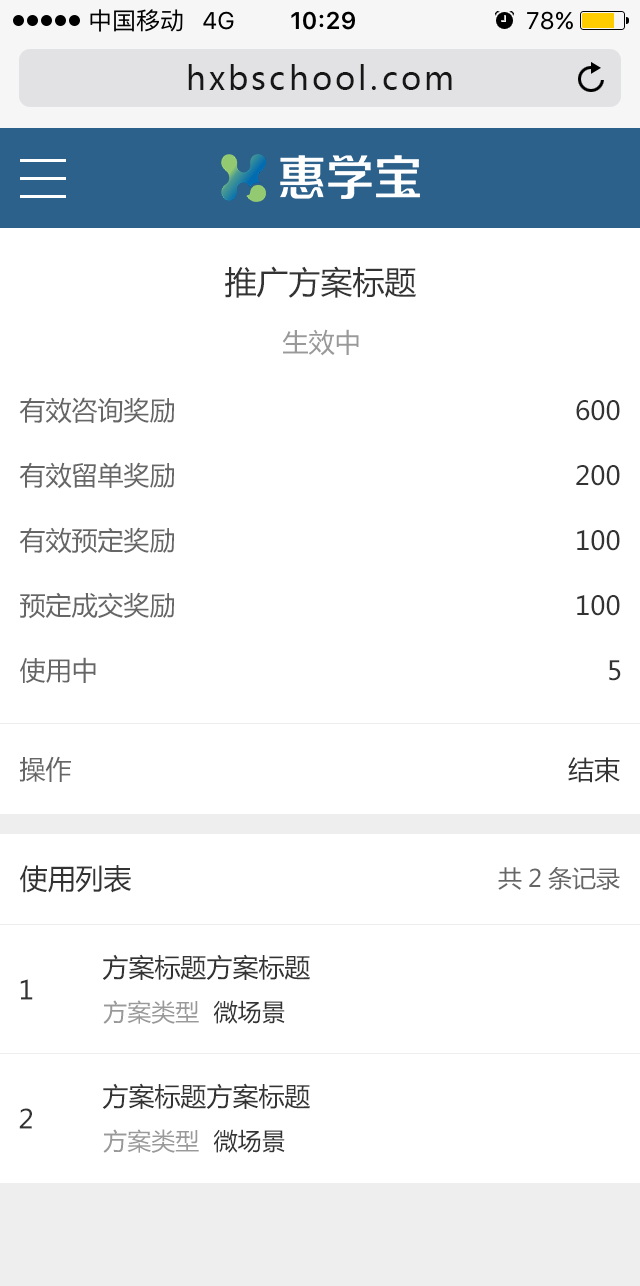
<style>
.page{position:relative;width:640px;height:1286px;background:#ffffff}
.page>*{position:absolute;margin:0}
.t1{font:32px "MicrosoftYaHei";letter-spacing:0.1em;color:#171717}
.t2{font:32px "MicrosoftYaHei";color:#333333}
.t3{font:26px "MicrosoftYaHei";color:#999999}
.t4{font:26px "MicrosoftYaHei";color:#666666}
.t5{font:26px "MicrosoftYaHei";color:#333333}
.t6{font:28px "MicrosoftYaHei";color:#333333}
.t7{font:24px "MicrosoftYaHei";color:#666666}
.t8{font:24px "MicrosoftYaHei";color:#999999}
.t9{font:24px "MicrosoftYaHei";color:#333333}
</style>
<div class="page">
<p class="t1" style="left:188px;top:64px;width:264px;height:26px">hxbschool.com</p>
<p class="t2" style="left:225px;top:266px;width:191px;height:32px">推广方案标题</p>
<p class="t3" style="left:282px;top:329px;width:77px;height:27px">生效中</p>
<p class="t4" style="left:19px;top:397px;width:155px;height:27px">有效咨询奖励</p>
<p class="t5" style="left:576px;top:400px;width:44px;height:21px">600</p>
<p class="t4" style="left:19px;top:462px;width:155px;height:27px">有效留单奖励</p>
<p class="t5" style="left:576px;top:465px;width:44px;height:21px">200</p>
<p class="t4" style="left:19px;top:527px;width:155px;height:27px">有效预定奖励</p>
<p class="t5" style="left:577px;top:530px;width:43px;height:21px">100</p>
<p class="t4" style="left:20px;top:592px;width:154px;height:27px">预定成交奖励</p>
<p class="t5" style="left:577px;top:595px;width:43px;height:21px">100</p>
<p class="t4" style="left:20px;top:657px;width:76px;height:26px">使用中</p>
<p class="t5" style="left:609px;top:660px;width:12px;height:21px">5</p>
<p class="t4" style="left:19px;top:756px;width:52px;height:26px">操作</p>
<p class="t5" style="left:568px;top:757px;width:52px;height:26px">结束</p>
<p class="t6" style="left:20px;top:865px;width:111px;height:28px">使用列表</p>
<p class="t7" style="left:498px;top:867px;width:122px;height:23px">共2条记录</p>
<p class="t5" style="left:102px;top:954px;width:208px;height:26px">方案标题方案标题</p>
<p class="t5" style="left:20px;top:979px;width:13px;height:21px">1</p>
<p class="t8" style="left:103px;top:1000px;width:182px;height:24px">方案类型  <span class="t9">微场景</span></p>
<p class="t5" style="left:102px;top:1083px;width:208px;height:26px">方案标题方案标题</p>
<p class="t5" style="left:19px;top:1108px;width:13px;height:21px">2</p>
<p class="t8" style="left:103px;top:1129px;width:182px;height:24px">方案类型  <span class="t9">微场景</span></p>
</div>
